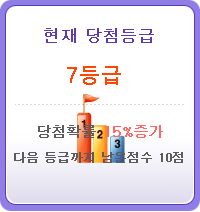
<style>
.page{position:relative;width:200px;height:212px;background:#ffffff}
.page>*{position:absolute;margin:0}
.t1{font:16px "Dotum";letter-spacing:0.04em;color:#5f3bb0;font-weight:bold}
.t2{font:20px "Dotum";letter-spacing:0.04em;color:#ff4605;font-weight:bold}
.t3{font:14px "Dotum";color:#fe6867;font-weight:bold}
.t4{font:14px "Dotum";color:#5c5c5c;font-weight:bold}
.t5{font:12px "Dotum";color:#5c5c5c;font-weight:bold}
</style>
<div class="page">
<p class="t1" style="left:44px;top:28px;width:110px;height:15px">현재 당첨등급</p>
<p class="t2" style="left:67px;top:66px;width:54px;height:19px">7등급</p>
<p class="t3" style="left:38px;top:125px;width:125px;height:13px"><span class="t4">당첨확률 </span>15%증가</p>
<p class="t5" style="left:14px;top:152px;width:169px;height:11px">다음 등급까지 남은점수 10점</p>
</div>
